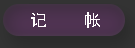
<style>
.page{position:relative;width:135px;height:48px}
.page>*{position:absolute;margin:0}
.t1{font:17px "SimHei";color:#fffdfd}
</style>
<div class="page">
<p class="t1" style="left:31px;top:12px;width:69px;height:16px">记    帐</p>
</div>
